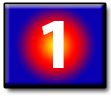
<style>
.page{position:relative;width:111px;height:96px}
.page>*{position:absolute;margin:0}
.t1{font:72px "MyriadPro-Bold";color:#ffffff}
</style>
<div class="page">
<p class="t1" style="left:42px;top:21px;width:22px;height:47px">1</p>
</div>
